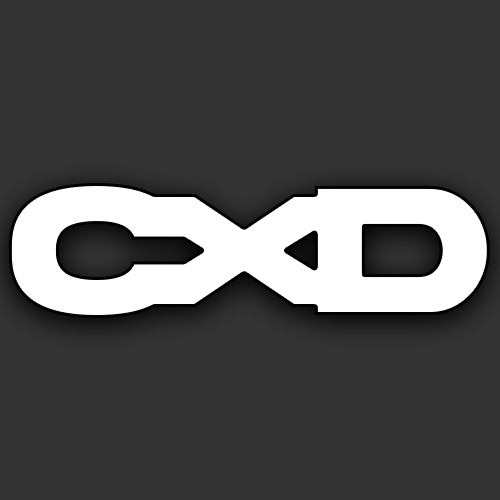
<style>
.page{position:relative;width:500px;height:500px;background:#333333}
.page>*{position:absolute;margin:0}
.t1{font:196.8px "AkiraExpanded-SuperBold";color:#ffffff}
.t2{font:172.3px "AkiraExpanded-SuperBold";color:#ffffff;scale:1.55 1}
</style>
<div class="page">
<p class="t1" style="left:8px;top:183px;width:482px;height:135px">C  D</p>
<p class="t2" style="left:109px;top:194px;width:270px;height:113px">X</p>
</div>
